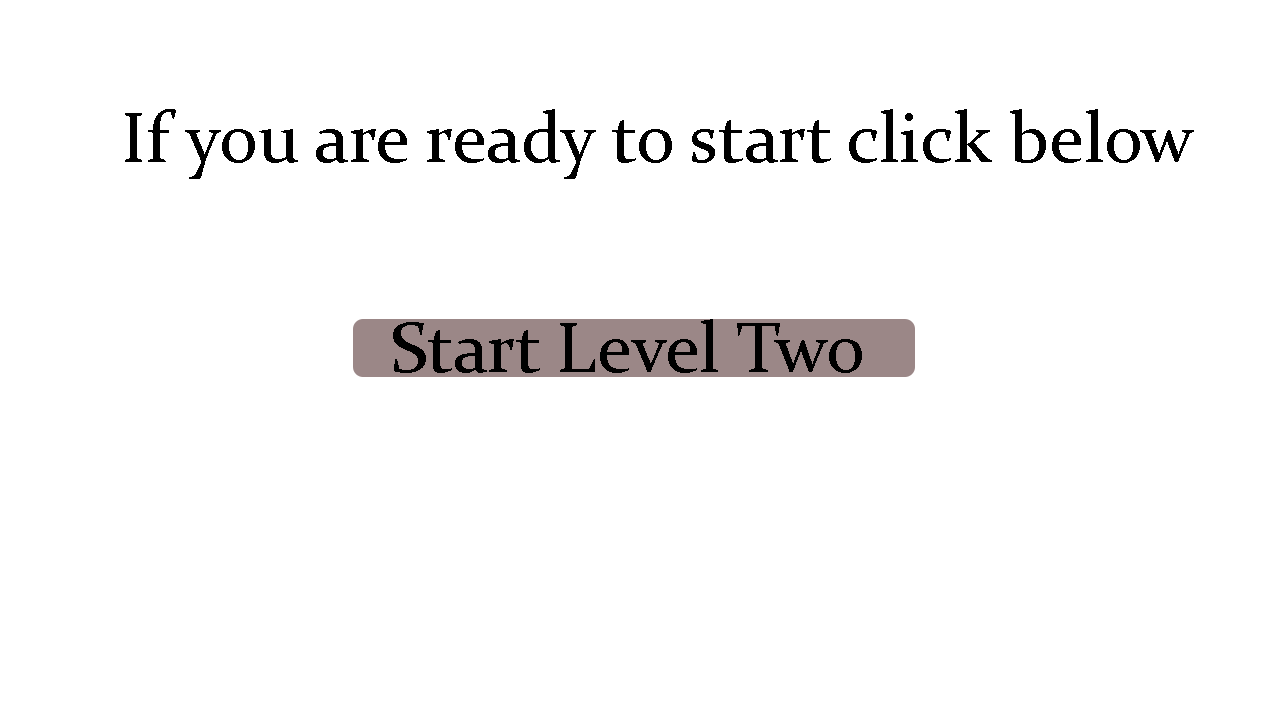
<style>
.page{position:relative;width:1280px;height:720px;background:#ffffff}
.page>*{position:absolute;margin:0}
.t1{font:72px "Constantia";color:#000000}
</style>
<div class="page">
<p class="t1" style="left:125px;top:109px;width:1069px;height:70px">If you are ready to start click below</p>
<p class="t1" style="left:393px;top:319px;width:469px;height:54px">Start Level Two</p>
</div>
